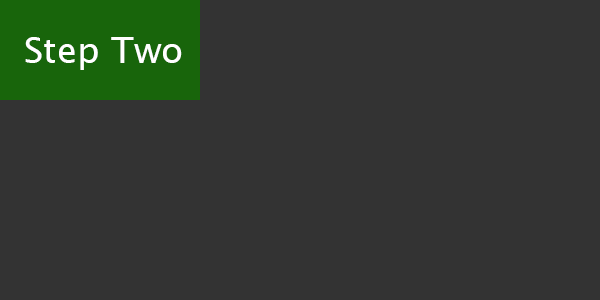
<style>
.page{position:relative;width:600px;height:300px;background:#333333}
.page>*{position:absolute;margin:0}
.t1{font:36px "LucidaSansUnicode";color:#ffffff}
</style>
<div class="page">
<p class="t1" style="left:25px;top:37px;width:157px;height:33px">Step Two</p>
</div>
